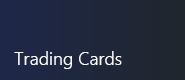
<style>
.page{position:relative;width:185px;height:80px}
.page>*{position:absolute;margin:0}
.t1{font:18px "SegoeUI-Semilight";color:#ffffff}
</style>
<div class="page">
<p class="t1" style="left:14px;top:51px;width:108px;height:18px">Trading Cards</p>
</div>
